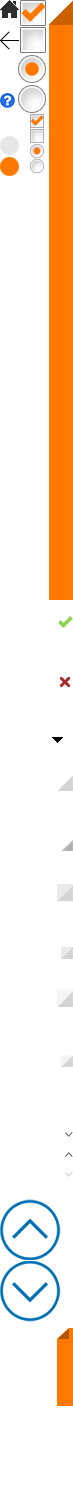
<style>
.page{position:relative;width:73px;height:1500px;background:#ffffff}
.page>*{position:absolute;margin:0}
.t1{font:10.1px "MS-PGothic"}
.t2{font:10.1px "MS-PGothic";color:#bfbfbf}
</style>
<div class="page">
<p class="t1" style="left:65px;top:1132px;width:8px;height:5px;rotate:90deg">&gt;</p>
<p class="t1" style="left:65px;top:1152px;width:8px;height:5px;rotate:-90deg">&gt;</p>
<p class="t2" style="left:65px;top:1172px;width:8px;height:5px;rotate:90deg">&gt;</p>
</div>
